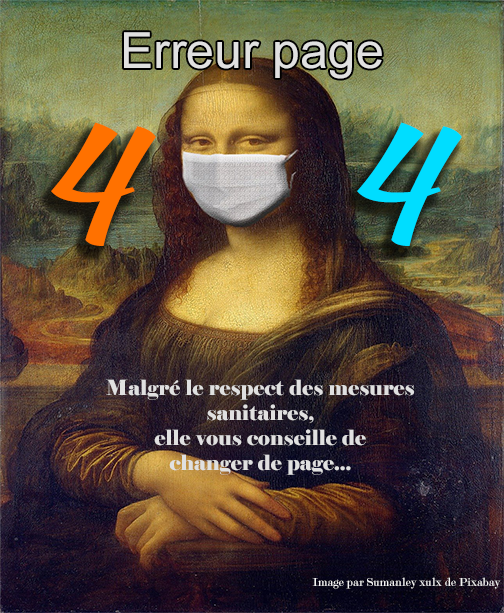
<style>
.page{position:relative;width:504px;height:613px}
.page>*{position:absolute;margin:0}
.t1{font:50px "ArialMT";color:#e0e0e0}
.t2{font:166.7px "KaushanScript-Regular";color:#ff7100}
.t3{font:166.7px "KaushanScript-Regular";color:#00ddff}
.t4{font:20.8px "Elephant-Regular";color:#e0e0e0}
.t5{font:12.5px "Modern-Regular";color:#f5f5f5}
</style>
<div class="page">
<p class="t1" style="left:124px;top:32px;width:258px;height:47px">Erreur page</p>
<p class="t2" style="left:51px;top:122px;width:105px;height:124px">4</p>
<p class="t3" style="left:357px;top:122px;width:105px;height:124px">4</p>
<p class="t4" style="left:106px;top:379px;width:308px;height:96px;text-align:center">Malgré le respect des mesures sanitaires, <br>elle vous conseille de <br>changer de page...</p>
<p class="t5" style="left:312px;top:577px;width:189px;height:12px">Image par Sumanley xulx de Pixabay</p>
</div>
